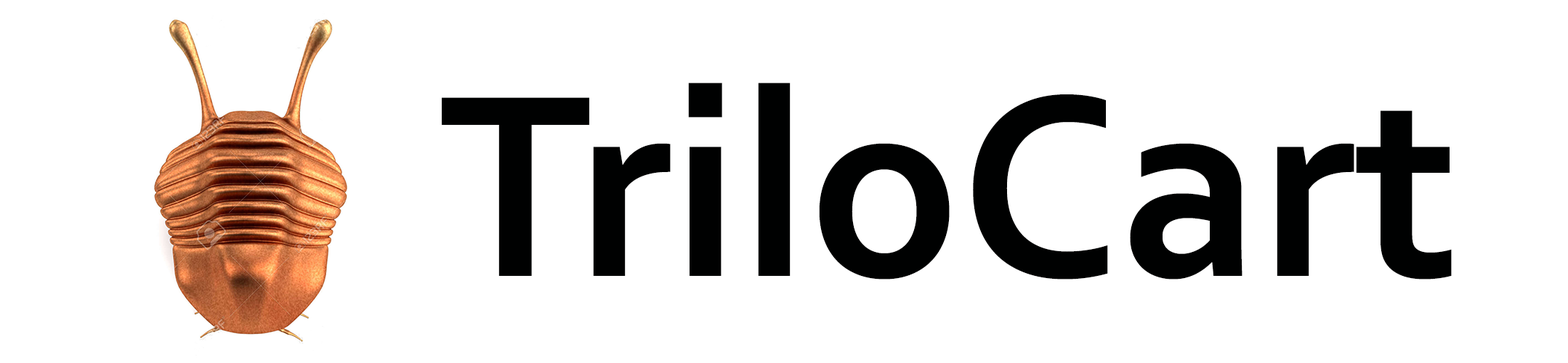
<style>
.page{position:relative;width:1568px;height:363px;background:#ffffff}
.page>*{position:absolute;margin:0}
.t1{font:273.1px "Corbel-Bold";color:#000101}
</style>
<div class="page">
<p class="t1" style="left:441px;top:83px;width:1011px;height:197px">TriloCart</p>
</div>
